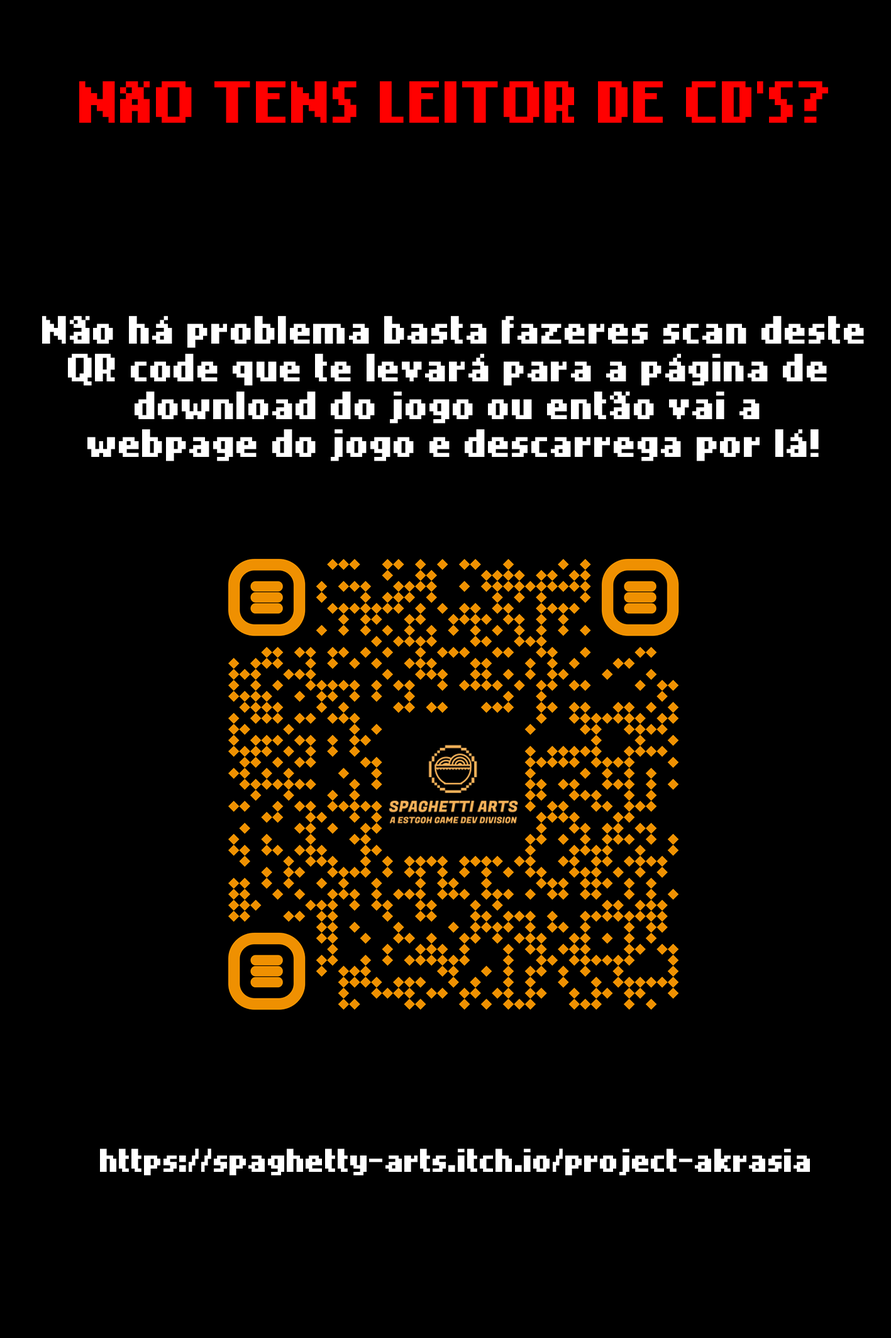
<style>
.page{position:relative;width:891px;height:1338px;background:#000000}
.page>*{position:absolute;margin:0}
.t1{font:47.2px "NokiaCellphoneFC-Small";color:#ff0000}
.t2{font:31.5px "NokiaCellphoneFC-Small";color:#ffffff}
.t3{font:26.2px "NokiaCellphoneFC-Small";letter-spacing:-0.02em;color:#ffffff}
</style>
<div class="page">
<p class="t1" style="left:79px;top:81px;width:750px;height:42px">NÃO TENS LEITOR DE CD’S?</p>
<p class="t2" style="left:42px;top:316px;width:822px;height:145px;text-align:center">Não há problema basta fazeres scan deste<br>QR code que te levará para a página de <br>download do jogo ou então vai a <br>webpage do jogo e descarrega por lá!</p>
<p class="t3" style="left:100px;top:1148px;width:710px;height:27px">https://spaghetty-arts.itch.io/project-akrasia</p>
</div>
